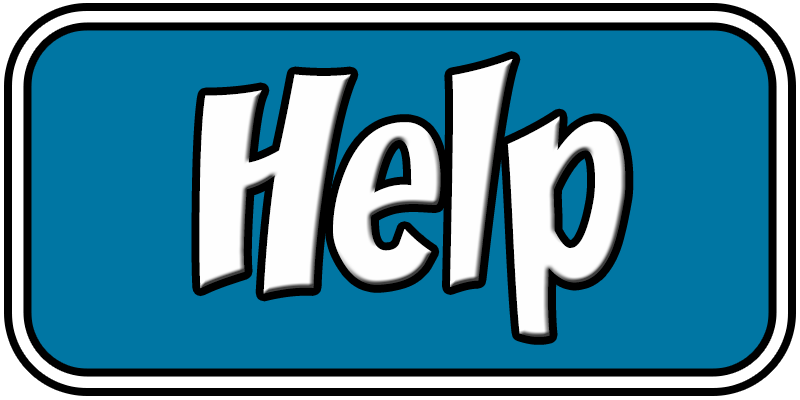
<style>
.page{position:relative;width:800px;height:400px;background:#0076a3}
.page>*{position:absolute;margin:0}
.t1{font:266.7px "Yikes";color:#fefefe}
</style>
<div class="page">
<p class="t1" style="left:199px;top:59px;width:427px;height:278px">Help</p>
</div>
